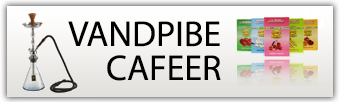
<style>
.page{position:relative;width:340px;height:102px}
.page>*{position:absolute;margin:0}
.t1{font:36px "MyriadPro-Regular";color:#000000}
</style>
<div class="page">
<p class="t1" style="left:68px;top:21px;width:152px;height:26px">VANDPIBE</p>
<p class="t1" style="left:107px;top:55px;width:114px;height:26px">CAFEER</p>
</div>
